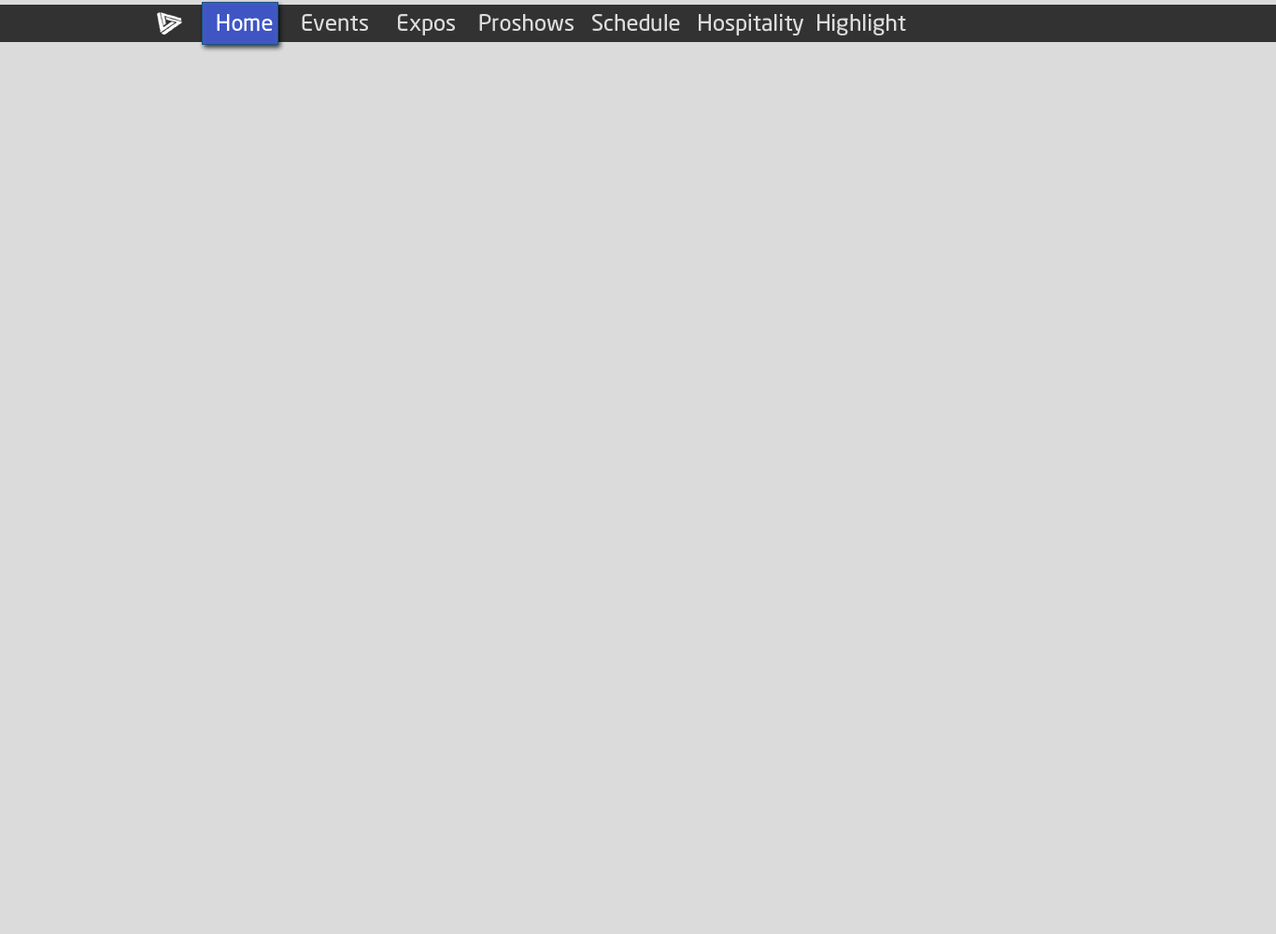
<style>
.page{position:relative;width:1276px;height:934px;background:#dbdbdb}
.page>*{position:absolute;margin:0}
.t1{font:22.4px "NeoSans";color:#dbdbdb}
.t2{font:22.4px "NeoSans";color:#ffffff}
</style>
<div class="page">
<p class="t1" style="left:217px;top:13px;width:689px;height:23px"><span class="t2">Home </span>    Events     Expos    Proshows   Schedule   Hospitality  Highlight</p>
</div>
